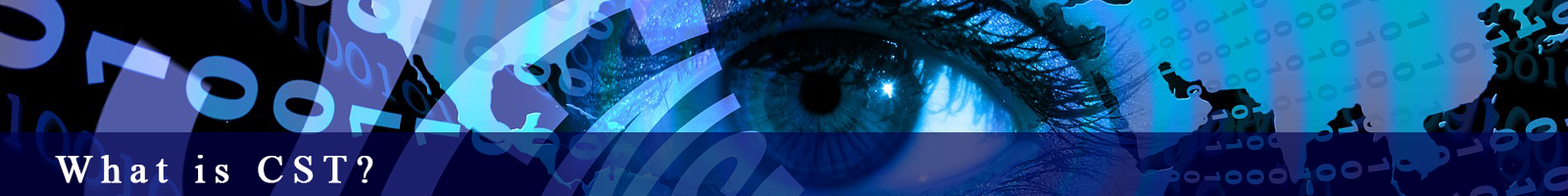
<style>
.page{position:relative;width:1568px;height:196px}
.page>*{position:absolute;margin:0}
.t1{font:39.2px "TimesNewRomanPSMT";letter-spacing:0.2em;color:#ffffff;font-weight:bold}
</style>
<div class="page">
<p class="t1" style="left:55px;top:155px;width:318px;height:28px">What is CST?</p>
</div>
